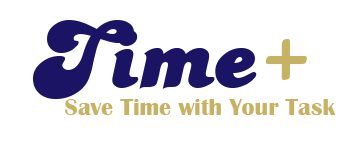
<style>
.page{position:relative;width:360px;height:144px;background:#ffffff}
.page>*{position:absolute;margin:0}
.t1{font:24px "BritannicBold";color:#c7b162}
.t2{font:100.3px "PT-BananaSplit";color:#1b1464}
.t3{font:100.3px "PT-BananaSplit";color:#c7b162}
</style>
<div class="page">
<p class="t1" style="left:33px;top:20px;width:303px;height:95px"><span class="t2">Time</span><span class="t3">+<br></span> Save Time with Your Task</p>
</div>
